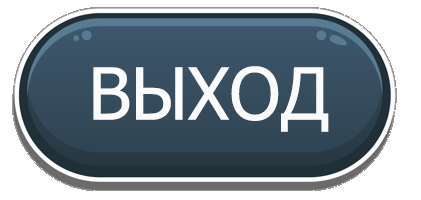
<style>
.page{position:relative;width:421px;height:200px;background:#ffffff}
.page>*{position:absolute;margin:0}
.t1{font:72px "Tahoma";color:#fcfcfc}
</style>
<div class="page">
<p class="t1" style="left:93px;top:66px;width:236px;height:66px">ВЫХОД</p>
</div>
